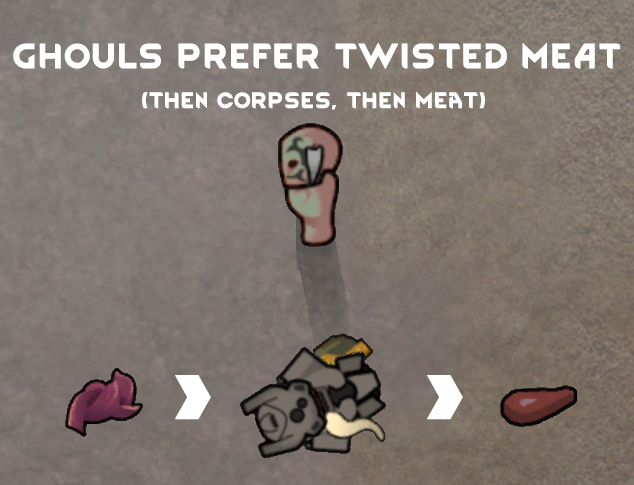
<style>
.page{position:relative;width:634px;height:485px}
.page>*{position:absolute;margin:0}
.t1{font:30px "RimWordFont";color:#ffffff}
.t2{font:19px "RimWordFont";color:#ffffff}
.t3{font:110px "RimWordFont";color:#ffffff}
</style>
<div class="page">
<p class="t1" style="left:13px;top:42px;width:608px;height:28px">Ghouls Prefer Twisted MEAT</p>
<p class="t2" style="left:142px;top:91px;width:343px;height:19px">(then corpses, then meat)</p>
<p class="t3" style="left:175px;top:375px;width:36px;height:45px">&gt;</p>
<p class="t3" style="left:427px;top:375px;width:36px;height:45px">&gt;</p>
</div>
